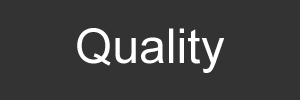
<style>
.page{position:relative;width:300px;height:100px;background:#333333}
.page>*{position:absolute;margin:0}
.t1{font:48px "ArialMT";color:#ffffff}
</style>
<div class="page">
<p class="t1" style="left:77px;top:28px;width:148px;height:45px">Quality</p>
</div>
